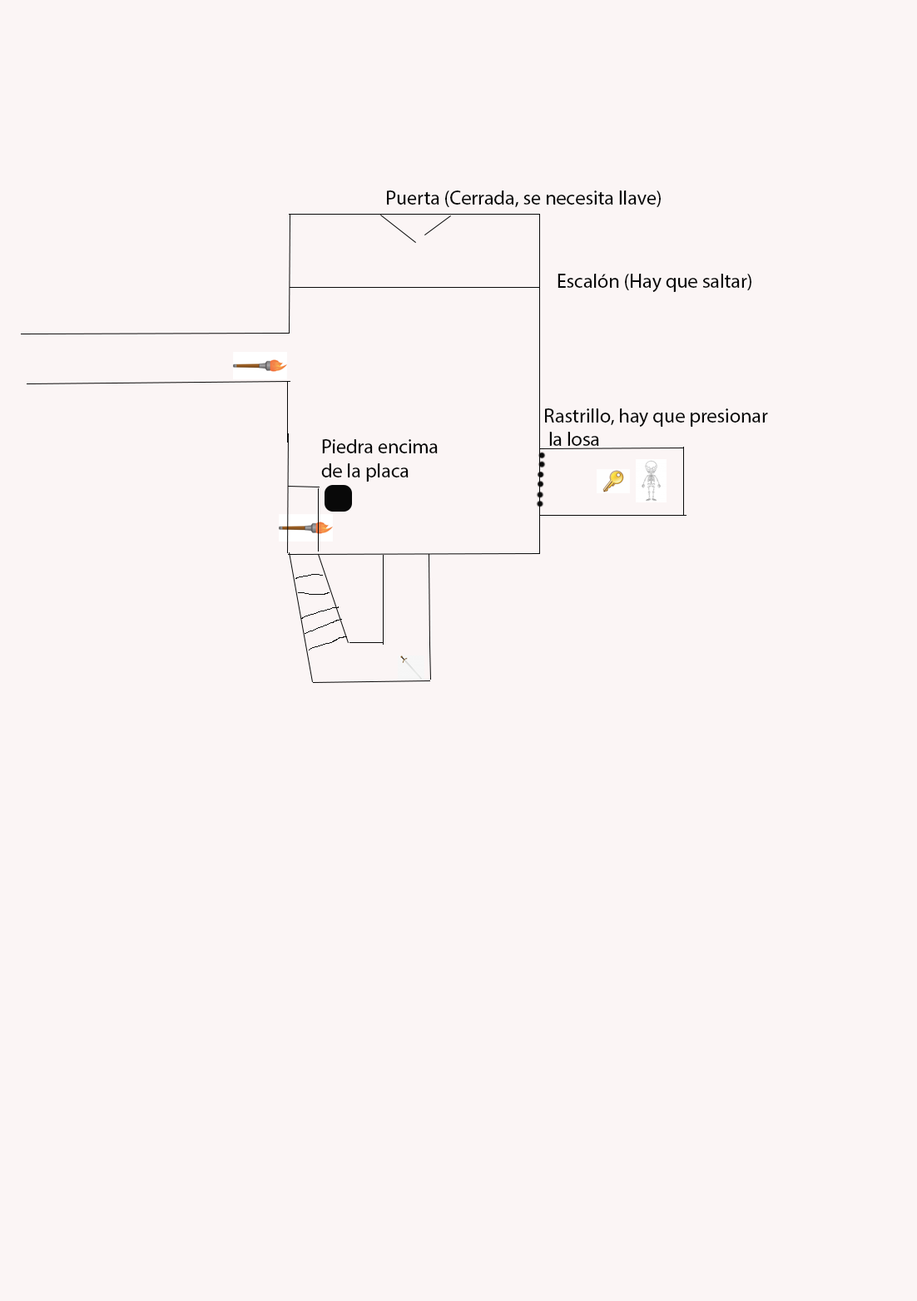
<style>
.page{position:relative;width:917px;height:1301px;background:#fbf5f5}
.page>*{position:absolute;margin:0}
.t1{font:10px "MyriadPro-Regular";color:#090909}
</style>
<div class="page">
<p class="t1" style="left:387px;top:190px;width:273px;height:17px">Puerta (Cerrada, se necesita llave)</p>
<p class="t1" style="left:557px;top:274px;width:194px;height:18px">Escalón (Hay que saltar)</p>
<p class="t1" style="left:545px;top:408px;width:223px;height:38px">Rastrillo, hay que presionar<br> la losa</p>
<p class="t1" style="left:321px;top:439px;width:117px;height:43px">Piedra encima<br>de la placa</p>
</div>
